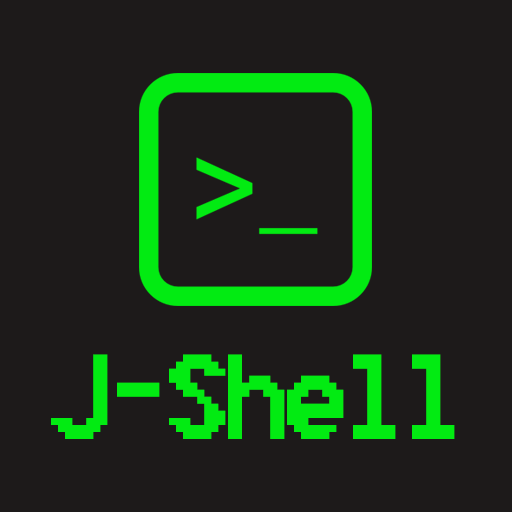
<style>
.page{position:relative;width:512px;height:512px;background:#1d1a1a}
.page>*{position:absolute;margin:0}
.t1{font:150px "8514oem";letter-spacing:-0.075em;color:#02eb12}
</style>
<div class="page">
<p class="t1" style="left:51px;top:354px;width:404px;height:85px">J-Shell</p>
</div>
